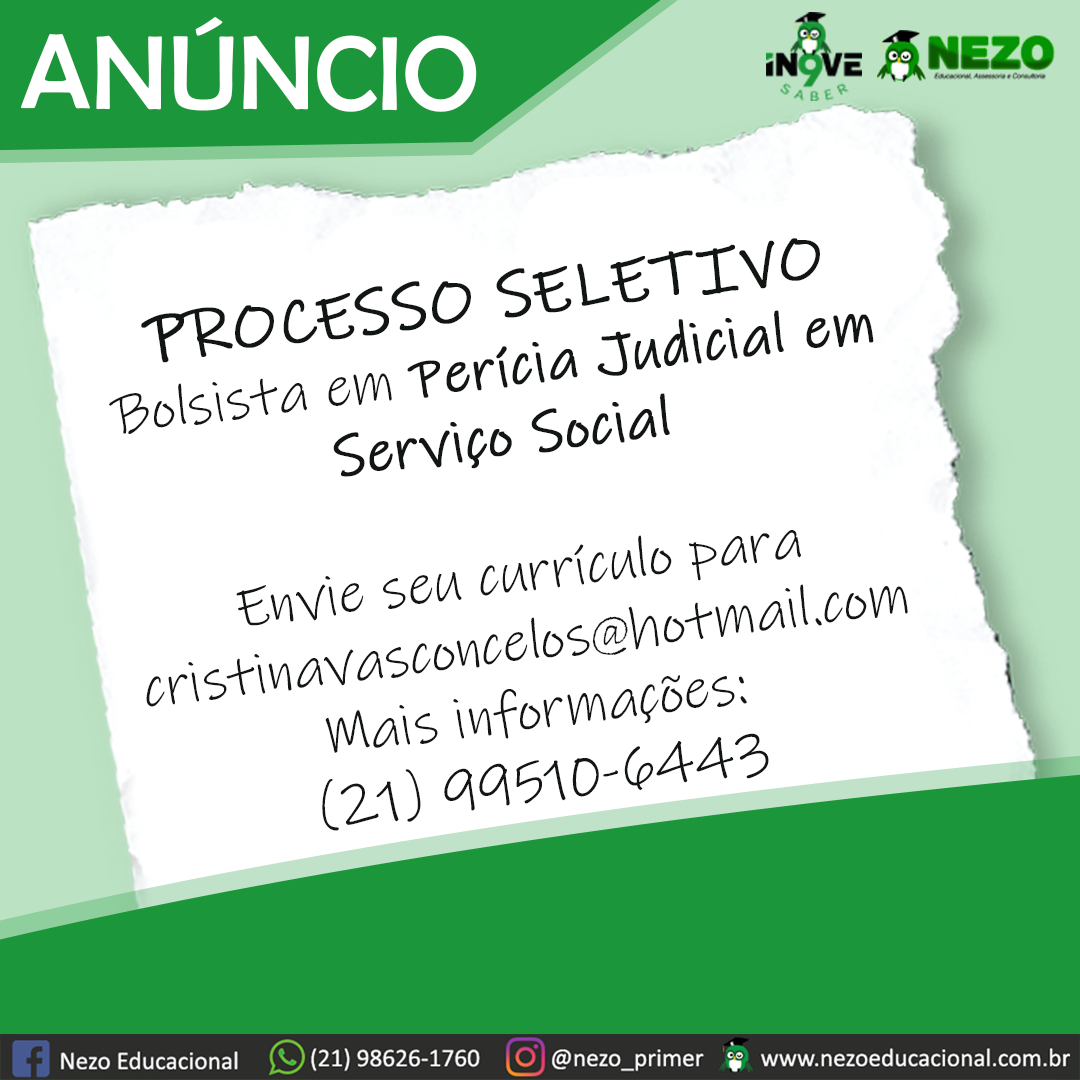
<style>
.page{position:relative;width:1080px;height:1080px;background:#ffffff}
.page>*{position:absolute;margin:0}
.t1{font:106.3px "BerlinSansFB-Reg";color:#ffffff}
.t2{font:57.4px "InkFree";color:#121613}
.t3{font:75.5px "InkFree";color:#121613;font-weight:bold}
.t4{font:64.3px "InkFree";color:#121613;font-weight:bold}
.t5{font:57.4px "InkFree";color:#121613;font-weight:bold}
.t6{font:57.4px "BradleyHandITC";color:#121613}
</style>
<div class="page">
<p class="t1" style="left:21px;top:16px;width:456px;height:96px">ANÚNCIO</p>
<p class="t2" style="left:109px;top:238px;width:799px;height:593px;text-align:center;rotate:-7deg"><span class="t3">P</span><span class="t4">ROCESSO SELETIVO<br></span>Bolsista em <span class="t5">Perícia Judicial em Serviço Social<br></span><br>Envie seu currículo para<br>cristinavasconcelos<span class="t6">@</span>hotmail.com<br>Mais informações:<br>(21) 99510-6443</p>
</div>
